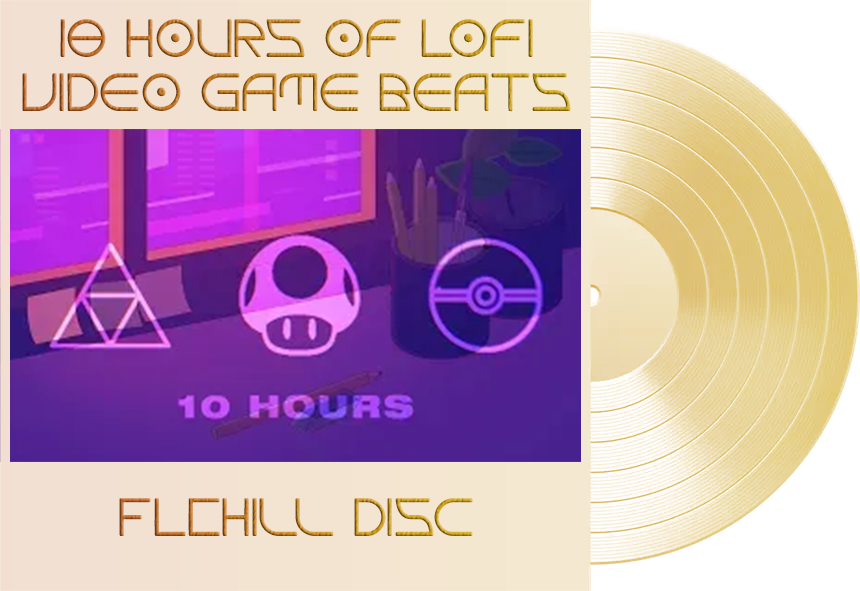
<style>
.page{position:relative;width:860px;height:591px}
.page>*{position:absolute;margin:0}
.t1{font:45px "Elektora"}
</style>
<div class="page">
<p class="t1" style="left:22px;top:19px;width:549px;height:93px;text-align:center">10 Hours of Lofi<br>video game beats</p>
<p class="t1" style="left:119px;top:498px;width:354px;height:38px">FLChill Disc</p>
</div>
